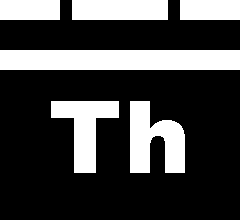
<style>
.page{position:relative;width:240px;height:220px;background:#000000}
.page>*{position:absolute;margin:0}
.t1{font:12px "Arial-Black";color:#ffffff}
</style>
<div class="page">
<p class="t1" style="left:51px;top:101px;width:134px;height:72px;text-align:center">Th</p>
</div>
